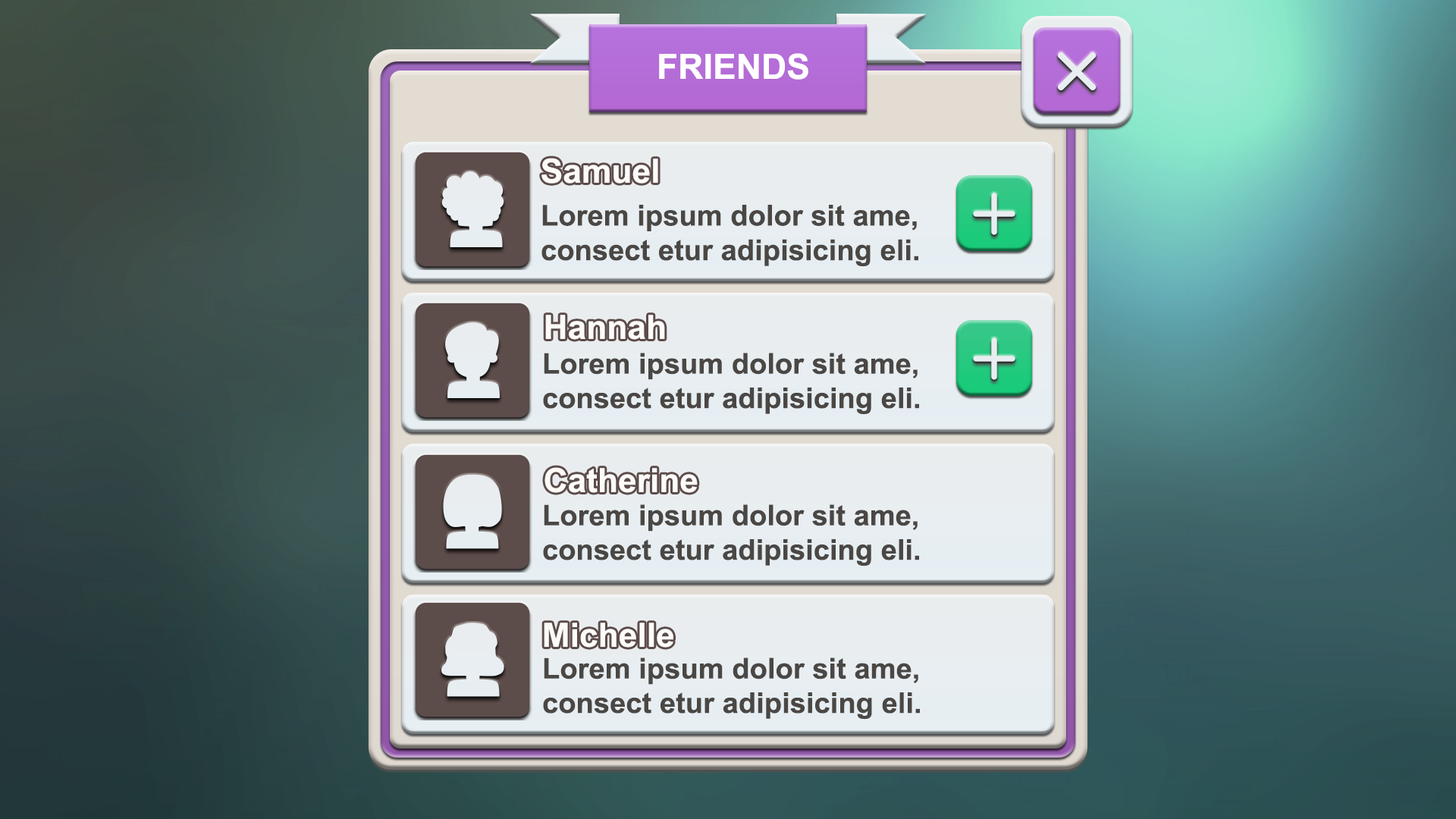
<style>
.page{position:relative;width:1456px;height:819px}
.page>*{position:absolute;margin:0}
.t1{font:34.9px "Arial-BoldMT";color:#ffffff}
.t2{font:33.6px "Arial-BoldMT";color:#ffffff}
.t3{font:28.8px "Arial-BoldMT";color:#4a4744}
.t4{font:33.3px "Arial-BoldMT";color:#ffffff}
.t5{font:28.6px "Arial-BoldMT";color:#4a4744}
</style>
<div class="page">
<p class="t1" style="left:659px;top:53px;width:149px;height:27px">FRIENDS</p>
<p class="t2" style="left:541px;top:158px;width:117px;height:26px">Samuel</p>
<p class="t3" style="left:541px;top:205px;width:377px;height:62px">Lorem ipsum dolor sit ame,<br>consect etur adipisicing eli.</p>
<p class="t4" style="left:545px;top:315px;width:120px;height:25px">Hannah</p>
<p class="t5" style="left:543px;top:353px;width:376px;height:62px">Lorem ipsum dolor sit ame,<br>consect etur adipisicing eli.</p>
<p class="t4" style="left:544px;top:467px;width:154px;height:26px">Catherine</p>
<p class="t5" style="left:543px;top:504px;width:376px;height:62px">Lorem ipsum dolor sit ame,<br>consect etur adipisicing eli.</p>
<p class="t4" style="left:544px;top:623px;width:129px;height:25px">Michelle</p>
<p class="t5" style="left:543px;top:657px;width:377px;height:63px">Lorem ipsum dolor sit ame,<br>consect etur adipisicing eli.</p>
</div>
